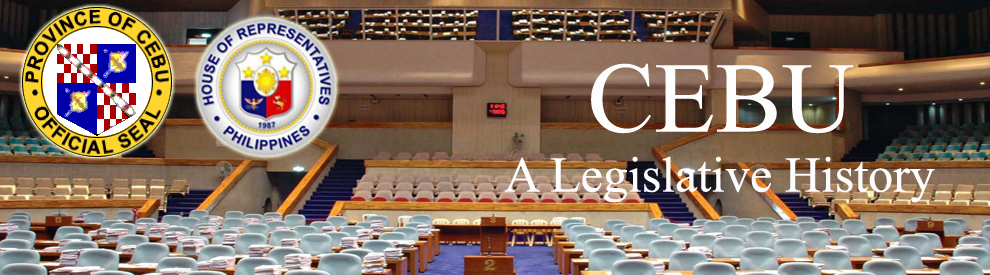
<style>
.page{position:relative;width:990px;height:275px}
.page>*{position:absolute;margin:0}
.t1{font:50px "TimesNewRomanPSMT";color:#fdfcfc}
.t2{font:100px "TimesNewRomanPSMT";color:#fdfdfd}
</style>
<div class="page">
<p class="t1" style="left:504px;top:63px;width:431px;height:140px;text-align:center"><span class="t2">CEBU<br></span>A Legislative History</p>
</div>
